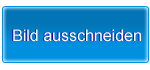
<style>
.page{position:relative;width:150px;height:70px;background:#ffffff}
.page>*{position:absolute;margin:0}
.t1{font:16px "ArialMT"}
.t2{font:16px "ArialMT";color:#ffffff}
</style>
<div class="page">
<p class="t1" style="left:12px;top:29px;width:128px;height:13px">Bild ausschneiden</p>
<p class="t2" style="left:13px;top:29px;width:128px;height:13px">Bild ausschneiden</p>
</div>
